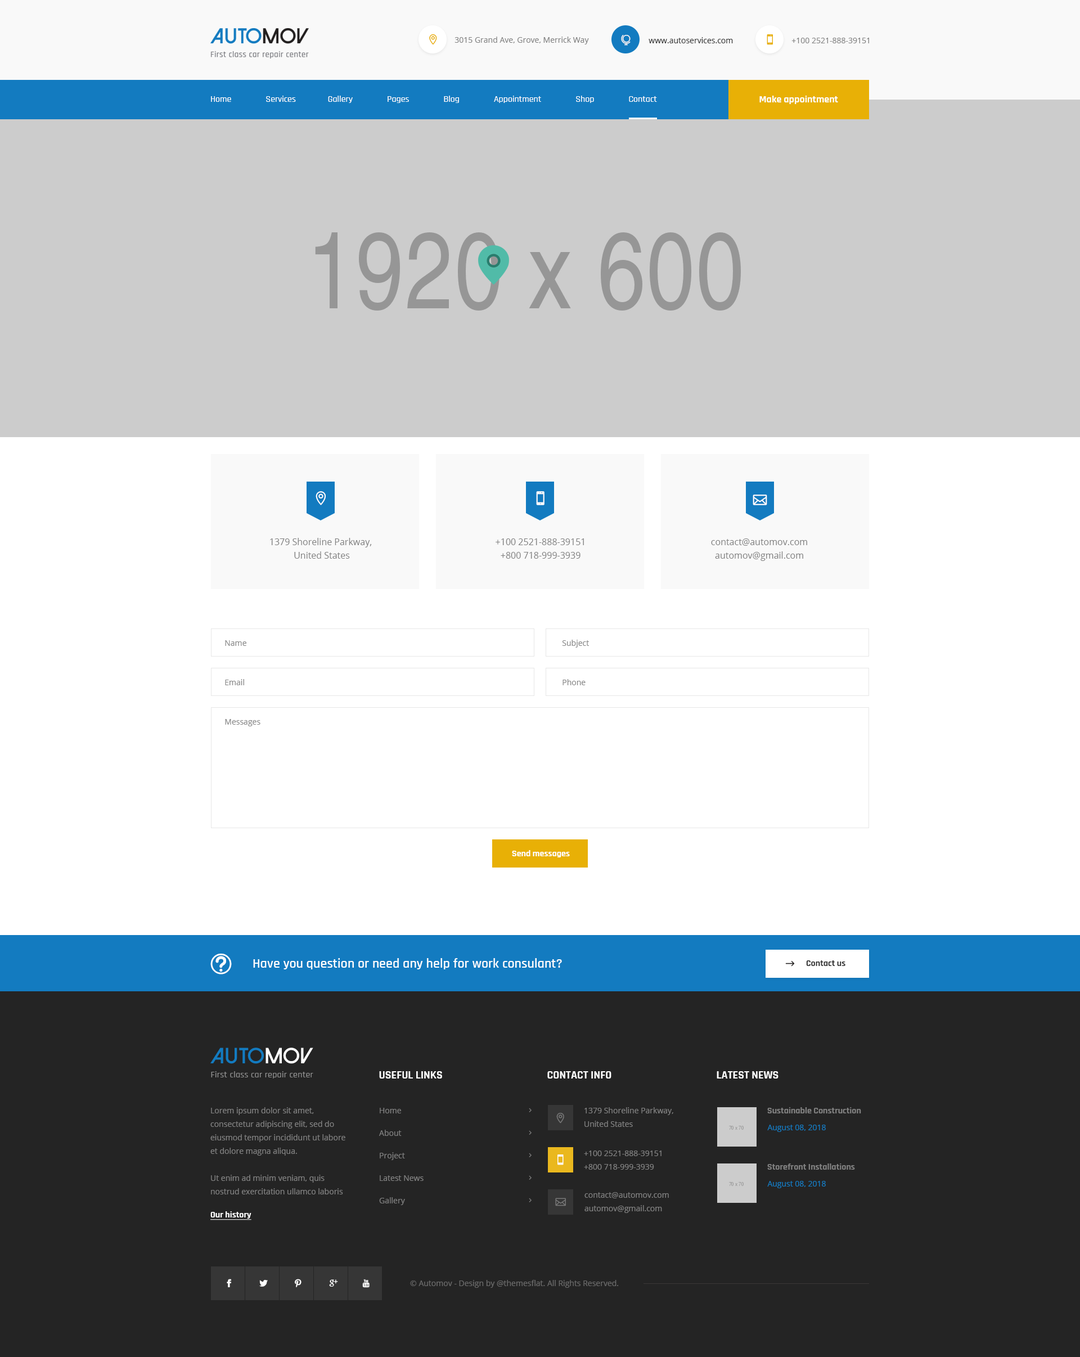
<style>
.page{position:relative;width:1080px;height:1357px;background:#ffffff}
.page>*{position:absolute;margin:0}
.t1{font:7.9px "OpenSans";color:#838383}
.t2{font:7.9px "OpenSans";color:#363636}
.t3{font:9px "Rajdhani-Medium";color:#ffffff}
.t4{font:10.1px "Rajdhani-Bold";color:#ffffff}
.t5{font:9px/13.5px "OpenSans";color:#808080}
.t6{font:7.9px/39.4px "OpenSans";color:#888888}
.t7{font:9px "Rajdhani-Bold";color:#ffffff}
.t8{font:13.5px "Rajdhani-SemiBold";color:#ffffff}
.t9{font:9px "Rajdhani-Bold";color:#363636}
.t10{font:11.2px "Rajdhani-Bold";color:#ffffff;text-transform:uppercase}
.t11{font:11.2px "Rajdhani-Bold";color:#ffffff}
.t12{font:7.9px/13.5px "OpenSans";color:#808080}
.t13{font:7.9px/22.5px "OpenSans";color:#808080}
.t14{font:9px "Rajdhani-Bold";color:#808080}
.t15{font:7.9px "OpenSans";color:#137bc0}
.t16{font:9px "Rajdhani-Bold";color:#ffffff;text-decoration:underline}
.t17{font:7.9px "OpenSans";color:#6a6a6a}
</style>
<div class="page">
<p class="t1" style="left:454px;top:37px;width:135px;height:7px">3015 Grand Ave, Grove, Merrick Way</p>
<p class="t2" style="left:649px;top:37px;width:84px;height:6px">www.autoservices.com</p>
<p class="t1" style="left:791px;top:38px;width:78px;height:5px">+100 2521-888-39151</p>
<p class="t3" style="left:211px;top:96px;width:446px;height:7px">Home               Services              Gallery               Pages               Blog               Appointment               Shop               Contact</p>
<p class="t4" style="left:759px;top:96px;width:79px;height:8px">Make appointment</p>
<p class="t5" style="left:270px;top:538px;width:102px;height:21px;text-align:center">1379 Shoreline Parkway, <br>United States</p>
<p class="t5" style="left:496px;top:538px;width:88px;height:21px;text-align:center">+100 2521-888-39151<br>+800 718-999-3939</p>
<p class="t5" style="left:711px;top:538px;width:96px;height:23px;text-align:center">contact@automov.com<br>automov@gmail.com</p>
<p class="t6" style="left:225px;top:640px;width:35px;height:86px">Name<br>Email<br>Messages</p>
<p class="t6" style="left:562px;top:640px;width:27px;height:45px">Subject<br>Phone</p>
<p class="t7" style="left:512px;top:850px;width:58px;height:7px">Send messages</p>
<p class="t8" style="left:253px;top:958px;width:309px;height:11px">Have you question or need any help for work consulant?</p>
<p class="t9" style="left:806px;top:960px;width:39px;height:6px">Contact us</p>
<p class="t10" style="left:379px;top:1071px;width:63px;height:7px">Useful Links</p>
<p class="t11" style="left:547px;top:1071px;width:64px;height:7px">CONTACT INFO</p>
<p class="t10" style="left:717px;top:1071px;width:61px;height:7px">Latest news</p>
<p class="t12" style="left:210px;top:1107px;width:135px;height:87px">Lorem ipsum dolor sit amet, consectetur adipiscing elit, sed do eiusmod tempor incididunt ut labore et dolore magna aliqua. <br><br>Ut enim ad minim veniam, quis nostrud exercitation ullamco laboris nisi</p>
<p class="t13" style="left:379px;top:1108px;width:45px;height:97px">Home<br>About<br>Project<br>Latest News<br>Gallery</p>
<p class="t12" style="left:584px;top:1107px;width:89px;height:20px">1379 Shoreline Parkway, <br>United States</p>
<p class="t14" style="left:767px;top:1107px;width:94px;height:6px">Sustainable Construction</p>
<p class="t15" style="left:767px;top:1124px;width:59px;height:8px">August 08, 2018</p>
<p class="t12" style="left:584px;top:1150px;width:78px;height:19px">+100 2521-888-39151<br>+800 718-999-3939</p>
<p class="t14" style="left:767px;top:1163px;width:88px;height:6px">Storefront Installations</p>
<p class="t15" style="left:767px;top:1181px;width:59px;height:7px">August 08, 2018</p>
<p class="t12" style="left:584px;top:1192px;width:85px;height:21px">contact@automov.com<br>automov@gmail.com</p>
<p class="t16" style="left:210px;top:1211px;width:41px;height:9px">Our history</p>
<p class="t17" style="left:410px;top:1280px;width:208px;height:8px">© Automov - Design by @themesflat. All Rights Reserved.</p>
</div>
